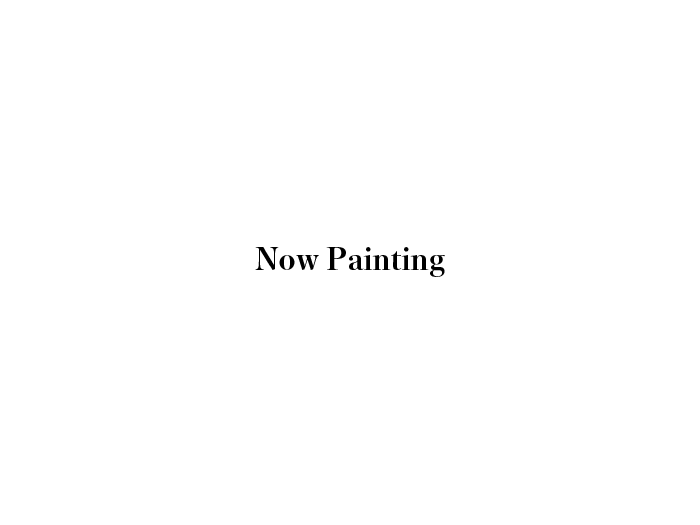
<style>
.page{position:relative;width:700px;height:525px;background:#ffffff}
.page>*{position:absolute;margin:0}
.t1{font:30px "YuMin-Extrabold";color:#000000}
</style>
<div class="page">
<p class="t1" style="left:255px;top:247px;width:190px;height:30px">Now Painting</p>
</div>
